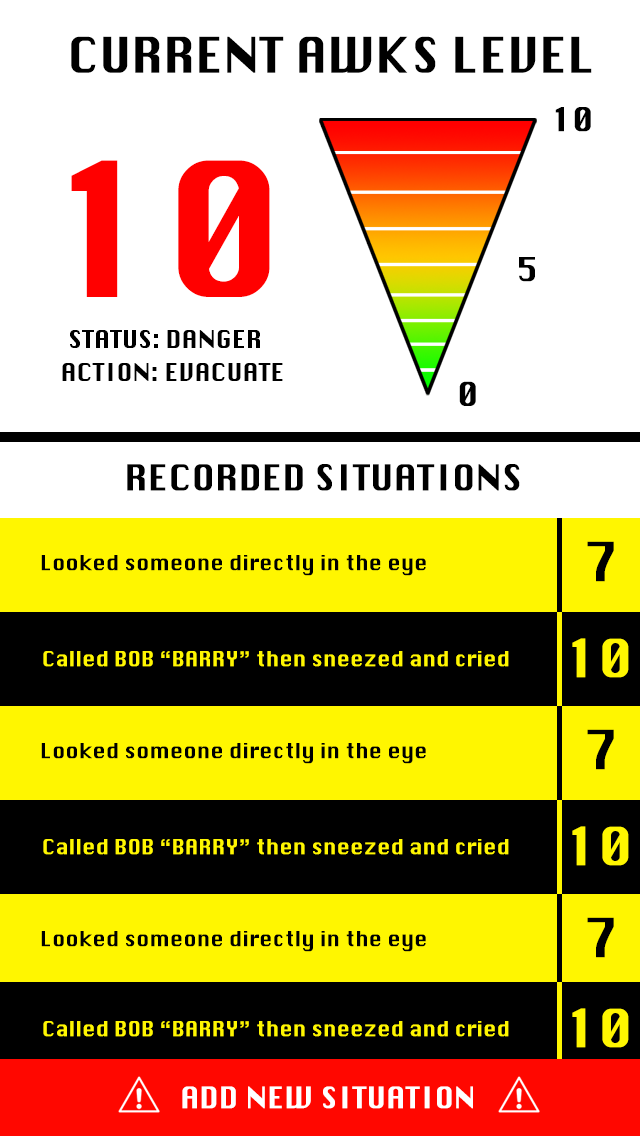
<style>
.page{position:relative;width:640px;height:1136px;background:#ffffff}
.page>*{position:absolute;margin:0}
.t1{font:48px "Krungthep";color:#000000}
.t2{font:32.4px "Krungthep";color:#000000}
.t3{font:181.8px "Krungthep";color:#ff0000}
.t4{font:24px "Krungthep";color:#000000}
.t5{font:35.1px "Krungthep";color:#000000}
.t6{font:52.8px "Krungthep";color:#000000}
.t7{font:20.2px "Krungthep";color:#000000}
.t8{font:51.5px "Krungthep";color:#fff600}
.t9{font:20.2px "Krungthep";color:#fff600}
.t10{font:29.1px "Krungthep";color:#ffffff}
</style>
<div class="page">
<p class="t1" style="left:71px;top:36px;width:521px;height:37px">CURRENT AWKS LEVEL</p>
<p class="t2" style="left:555px;top:107px;width:36px;height:25px">10</p>
<p class="t3" style="left:71px;top:160px;width:199px;height:137px">10</p>
<p class="t2" style="left:519px;top:257px;width:16px;height:25px">5</p>
<p class="t4" style="left:70px;top:330px;width:190px;height:18px">STATUS: DANGER</p>
<p class="t4" style="left:62px;top:363px;width:221px;height:18px">ACTION: EVACUATE</p>
<p class="t2" style="left:459px;top:381px;width:17px;height:25px">0</p>
<p class="t5" style="left:127px;top:464px;width:393px;height:27px">RECORDED SITUATIONS</p>
<p class="t6" style="left:587px;top:541px;width:27px;height:41px">7</p>
<p class="t7" style="left:41px;top:555px;width:385px;height:21px">Looked someone directly in the eye</p>
<p class="t8" style="left:572px;top:638px;width:57px;height:40px">10</p>
<p class="t9" style="left:43px;top:651px;width:466px;height:16px">Called BOB “BARRY” then sneezed and cried</p>
<p class="t6" style="left:587px;top:729px;width:27px;height:41px">7</p>
<p class="t7" style="left:41px;top:743px;width:385px;height:21px">Looked someone directly in the eye</p>
<p class="t8" style="left:572px;top:826px;width:57px;height:40px">10</p>
<p class="t9" style="left:43px;top:839px;width:466px;height:16px">Called BOB “BARRY” then sneezed and cried</p>
<p class="t6" style="left:587px;top:917px;width:27px;height:41px">7</p>
<p class="t7" style="left:41px;top:931px;width:385px;height:21px">Looked someone directly in the eye</p>
<p class="t8" style="left:572px;top:1008px;width:57px;height:40px">10</p>
<p class="t9" style="left:43px;top:1021px;width:466px;height:16px">Called BOB “BARRY” then sneezed and cried</p>
<p class="t10" style="left:182px;top:1086px;width:291px;height:23px">ADD NEW SITUATION</p>
</div>
